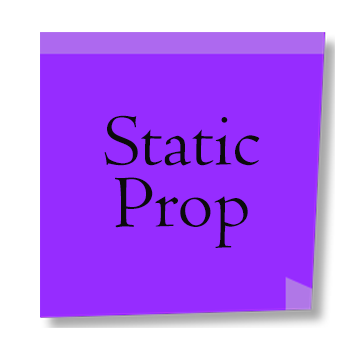
<style>
.page{position:relative;width:350px;height:350px;background:#962cff}
.page>*{position:absolute;margin:0}
.t1{font:76.9px/61.7px "Centaur";color:#0b0b0b}
</style>
<div class="page">
<p class="t1" style="left:104px;top:115px;width:156px;height:133px;text-align:center">Static<br>Prop</p>
</div>
